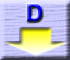
<style>
.page{position:relative;width:70px;height:60px}
.page>*{position:absolute;margin:0}
.t1{font:24px "Arial-BoldMT"}
</style>
<div class="page">
<p class="t1" style="left:27px;top:4px;width:15px;height:18px">D</p>
</div>
